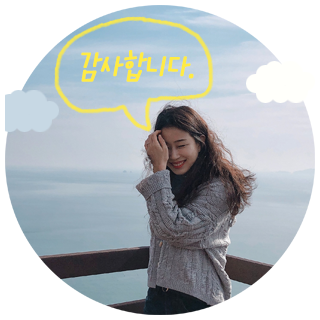
<style>
.page{position:relative;width:320px;height:320px;background:#ffffff}
.page>*{position:absolute;margin:0}
.t1{font:32.8px "THELeft";letter-spacing:-0.035em;color:#ffeb43;font-weight:bold;font-style:italic}
</style>
<div class="page">
<p class="t1" style="left:81px;top:50px;width:113px;height:32px">감사합니다.</p>
</div>
